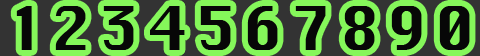
<style>
.page{position:relative;width:480px;height:56px;background:#85f75a}
.page>*{position:absolute;margin:0}
.t1{font:59px "Silom";letter-spacing:0.16em;color:#070707}
</style>
<div class="page">
<p class="t1" style="left:16px;top:6px;width:454px;height:44px">1234567890</p>
</div>
